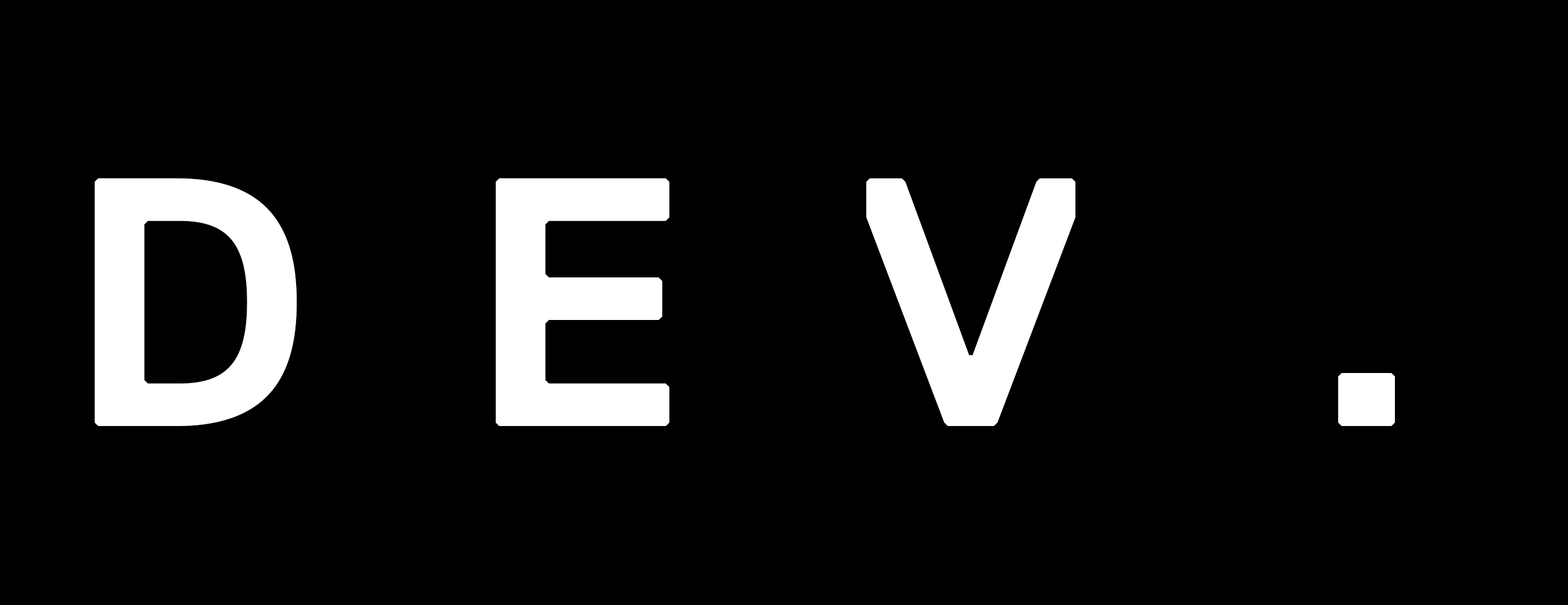
<style>
.page{position:relative;width:1568px;height:605px;background:#000000}
.page>*{position:absolute;margin:0}
.t1{font:354.1px "ReplicaStd-Bold";color:#ffffff}
</style>
<div class="page">
<p class="t1" style="left:95px;top:178px;width:202px;height:248px">D</p>
<p class="t1" style="left:496px;top:178px;width:173px;height:248px">E</p>
<p class="t1" style="left:866px;top:179px;width:210px;height:247px">V</p>
<p class="t1" style="left:1338px;top:373px;width:57px;height:53px">.</p>
</div>
